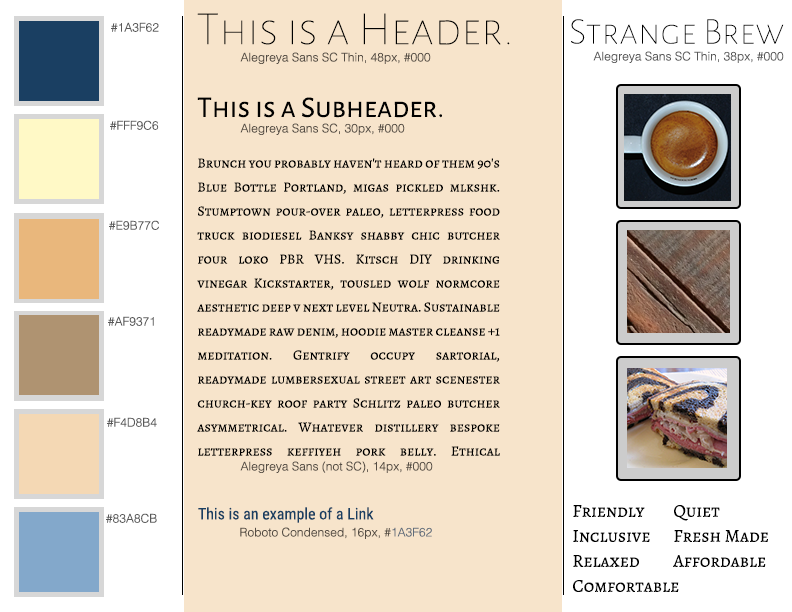
<style>
.page{position:relative;width:792px;height:612px;background:#f7e4cb}
.page>*{position:absolute;margin:0}
.t1{font:48px "AlegreyaSansSC-Thin";color:#000000}
.t2{font:12px "Helvetica-Light";color:#585858}
.t3{font:38px "AlegreyaSansSC-Thin";color:#000000}
.t4{font:12px "Helvetica-Light";color:#554d44}
.t5{font:30px "AlegreyaSansSC-Regular";color:#000000}
.t6{font:14px/24px "AlegreyaSC-Regular";color:#000000}
.t7{font:16px "MyriadPro-Regular"}
.t8{font:16px "RobotoCondensed-Regular";color:#1a3f62}
.t9{font:18px "AnticSlab-Regular"}
.t10{font:18px "AlegreyaSC-Regular";color:#000000}
</style>
<div class="page">
<p class="t1" style="left:197px;top:13px;width:313px;height:32px">This is a Header.</p>
<p class="t2" style="left:111px;top:22px;width:48px;height:10px">#1A3F62</p>
<p class="t3" style="left:571px;top:19px;width:213px;height:25px">Strange Brew</p>
<p class="t4" style="left:240px;top:52px;width:191px;height:12px">Alegreya Sans SC Thin, 48px, #000</p>
<p class="t2" style="left:593px;top:51px;width:191px;height:12px">Alegreya Sans SC Thin, 38px, #000</p>
<p class="t5" style="left:197px;top:97px;width:245px;height:21px">This is a Subheader.</p>
<p class="t2" style="left:110px;top:120px;width:49px;height:10px">#FFF9C6</p>
<p class="t4" style="left:240px;top:123px;width:165px;height:12px">Alegreya Sans SC, 30px, #000</p>
<p class="t6" style="left:197px;top:158px;width:303px;height:298px;text-align:justify">Brunch you probably haven't heard of them 90's Blue Bottle Portland, migas pickled mlkshk. Stumptown pour-over paleo, letterpress food truck biodiesel Banksy shabby chic butcher four loko PBR VHS. Kitsch DIY drinking vinegar Kickstarter, tousled wolf normcore aesthetic deep v next level Neutra. Sustainable readymade raw denim, hoodie master cleanse +1 meditation. Gentrify occupy sartorial, readymade lumbersexual street art scenester church-key roof party Schlitz paleo butcher asymmetrical. Whatever distillery bespoke letterpress keffiyeh pork belly. Ethical selvage letterpress Godard, you probably haven't heard of them distillery normcore 90's whatever.</p>
<p class="t2" style="left:109px;top:220px;width:50px;height:10px">#E9B77C</p>
<p class="t2" style="left:108px;top:316px;width:46px;height:10px">#AF9371</p>
<p class="t2" style="left:107px;top:417px;width:50px;height:10px">#F4D8B4</p>
<p class="t4" style="left:240px;top:461px;width:193px;height:12px">Alegreya Sans (not SC), 14px, #000</p>
<p class="t7" style="left:197px;top:507px;width:182px;height:16px">This is an example of a Link</p>
<p class="t8" style="left:198px;top:507px;width:176px;height:16px">This is an example of a Link</p>
<p class="t9" style="left:573px;top:503px;width:71px;height:19px">keyword</p>
<p class="t10" style="left:573px;top:505px;width:72px;height:13px">Friendly</p>
<p class="t10" style="left:674px;top:505px;width:46px;height:16px">Quiet</p>
<p class="t2" style="left:106px;top:513px;width:51px;height:10px">#83A8CB</p>
<p class="t4" style="left:240px;top:527px;width:192px;height:12px">Roboto Condensed, 16px, #1A3F62</p>
<p class="t10" style="left:573px;top:530px;width:77px;height:13px">Inclusive</p>
<p class="t10" style="left:674px;top:530px;width:94px;height:13px">Fresh Made</p>
<p class="t10" style="left:573px;top:555px;width:66px;height:12px">Relaxed</p>
<p class="t10" style="left:673px;top:555px;width:93px;height:12px">Affordable</p>
<p class="t10" style="left:573px;top:580px;width:106px;height:12px">Comfortable</p>
</div>
